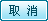
<style>
.page{position:relative;width:48px;height:21px}
.page>*{position:absolute;margin:0}
.t1{font:12px "SimSun";color:#014b5e}
</style>
<div class="page">
<p class="t1" style="left:9px;top:5px;width:28px;height:11px">取 消</p>
</div>
